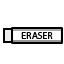
<style>
.page{position:relative;width:64px;height:64px;background:#ffffff}
.page>*{position:absolute;margin:0}
.t1{font:10px "MyriadPro-Regular";color:#000000}
</style>
<div class="page">
<p class="t1" style="left:21px;top:32px;width:32px;height:7px">ERASER</p>
</div>
